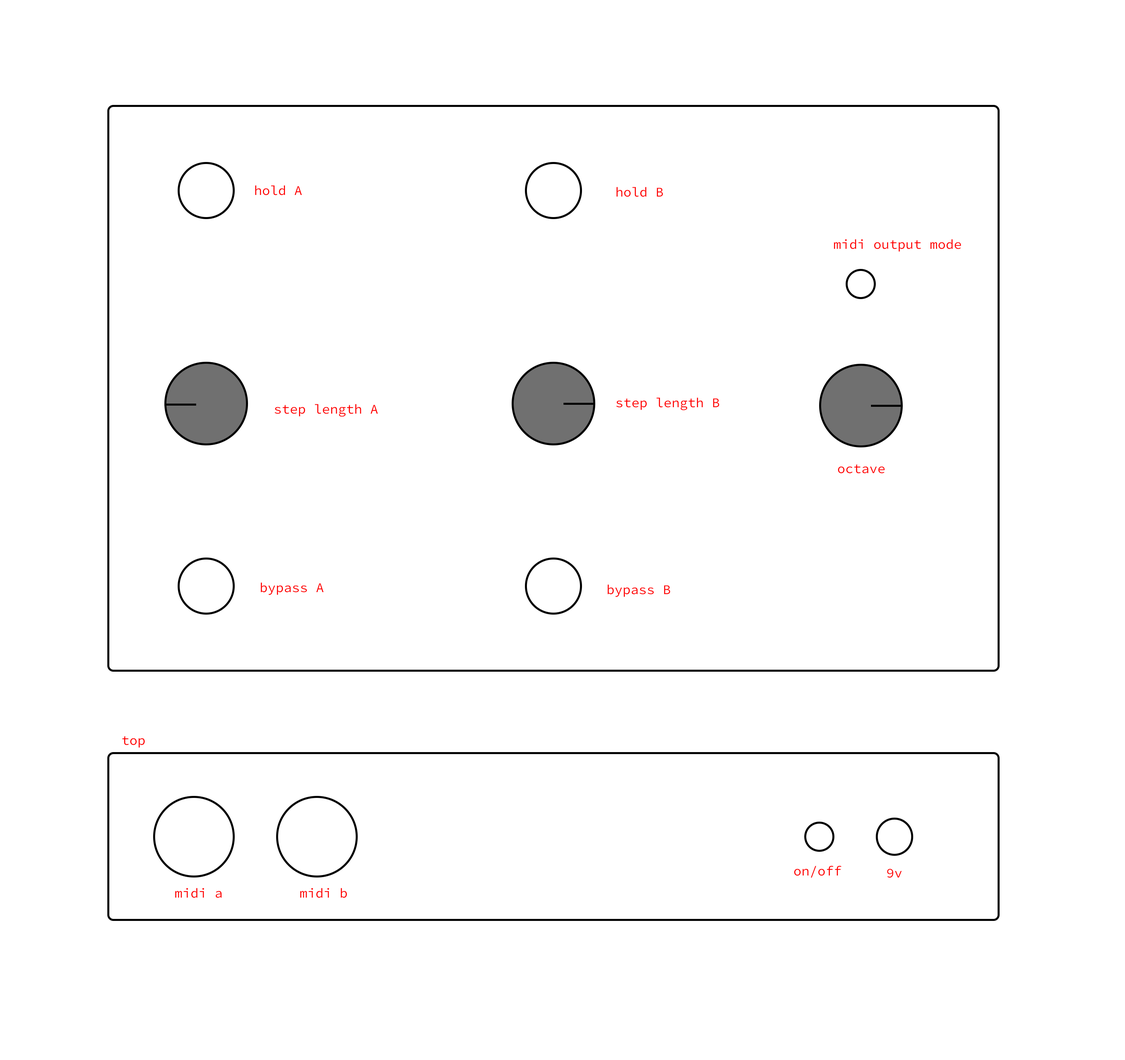
<style>
.page{position:relative;width:1125px;height:1060px;background:#ffffff}
.page>*{position:absolute;margin:0}
.t1{font:13.4px "SourceCodeVariable-Roman";color:#ff0000;font-weight:bold}
</style>
<div class="page">
<p class="t1" style="left:255px;top:185px;width:47px;height:10px">hold A</p>
<p class="t1" style="left:617px;top:187px;width:46px;height:10px">hold B</p>
<p class="t1" style="left:834px;top:239px;width:127px;height:13px">midi output mode</p>
<p class="t1" style="left:616px;top:398px;width:103px;height:12px">step length B</p>
<p class="t1" style="left:275px;top:404px;width:103px;height:13px">step length A</p>
<p class="t1" style="left:838px;top:464px;width:47px;height:9px">octave</p>
<p class="t1" style="left:261px;top:582px;width:63px;height:13px">bypass A</p>
<p class="t1" style="left:608px;top:584px;width:62px;height:13px">bypass B</p>
<p class="t1" style="left:122px;top:736px;width:23px;height:12px">top</p>
<p class="t1" style="left:794px;top:865px;width:48px;height:13px">on/off</p>
<p class="t1" style="left:887px;top:869px;width:15px;height:9px">9v</p>
<p class="t1" style="left:175px;top:888px;width:47px;height:10px">midi a</p>
<p class="t1" style="left:300px;top:888px;width:47px;height:10px">midi b</p>
</div>
